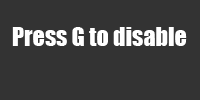
<style>
.page{position:relative;width:200px;height:100px;background:#333333}
.page>*{position:absolute;margin:0}
.t1{font:24px "Impact";color:#ffffff}
</style>
<div class="page">
<p class="t1" style="left:12px;top:27px;width:175px;height:19px">Press G to disable</p>
</div>
